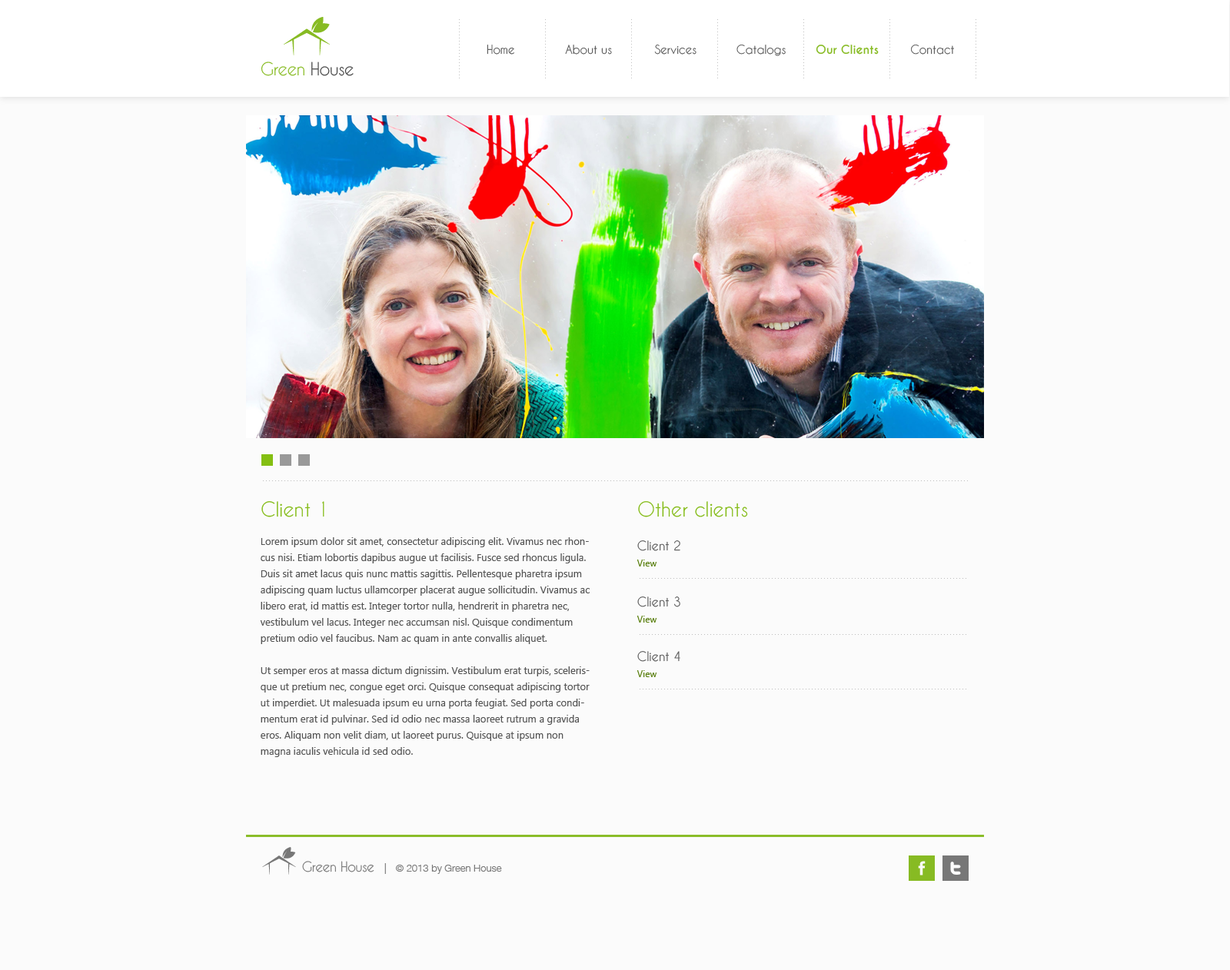
<style>
.page{position:relative;width:1230px;height:970px;background:#fbfbfb}
.page>*{position:absolute;margin:0}
.t1{font:11.5px "CaviarDreams";color:#555555}
.t2{font:11.5px "CaviarDreams-Bold";color:#87bb23}
.t3{font:16.9px "CaviarDreams";letter-spacing:-0.025em;color:#87bb23}
.t4{font:16.9px "CaviarDreams";letter-spacing:-0.025em;color:#444444}
.t5{font:19.2px "CaviarDreams";color:#83bb15}
.t6{font:10px/16.1px "SegoeUI";color:#555555}
.t7{font:12.3px/16.1px "CaviarDreams";color:#555555}
.t8{font:9.2px/16.1px "SegoeUI";color:#577d0a}
.t9{font:13.1px "CaviarDreams";letter-spacing:-0.025em;color:#777777}
.t10{font:10px "HelveticaNeueW02-45Light";color:#777777}
.t11{font:10.8px "HelveticaNeueW02-45Light";color:#777777}
</style>
<div class="page">
<p class="t1" style="left:486px;top:45px;width:468px;height:11px">Home         About us            Services       Catalogs   <span class="t2">Our Clients        </span>Contact</p>
<p class="t3" style="left:261px;top:61px;width:92px;height:15px">Green <span class="t4">House</span></p>
<p class="t5" style="left:261px;top:501px;width:63px;height:16px">Client 1</p>
<p class="t5" style="left:638px;top:501px;width:110px;height:16px">Other clients</p>
<p class="t6" style="left:260px;top:537px;width:329px;height:220px">Lorem ipsum dolor sit amet, consectetur adipiscing elit. Vivamus nec rhoncus nisi. Etiam lobortis dapibus augue ut facilisis. Fusce sed rhoncus ligula. Duis sit amet lacus quis nunc mattis sagittis. Pellentesque pharetra ipsum adipiscing quam luctus ullamcorper placerat augue sollicitudin. Vivamus ac libero erat, id mattis est. Integer tortor nulla, hendrerit in pharetra nec, vestibulum vel lacus. Integer nec accumsan nisl. Quisque condimentum pretium odio vel faucibus. Nam ac quam in ante convallis aliquet. <br><br>Ut semper eros at massa dictum dignissim. Vestibulum erat turpis, scelerisque ut pretium nec, congue eget orci. Quisque consequat adipiscing tortor ut imperdiet. Ut malesuada ipsum eu urna porta feugiat. Sed porta condimentum erat id pulvinar. Sed id odio nec massa laoreet rutrum a gravida eros. Aliquam non velit diam, ut laoreet purus. Quisque at ipsum non magna iaculis vehicula id sed odio.</p>
<p class="t7" style="left:636px;top:540px;width:44px;height:26px">Client 2<br><span class="t8">View</span></p>
<p class="t7" style="left:636px;top:596px;width:44px;height:26px">Client 3<br><span class="t8">View</span></p>
<p class="t7" style="left:636px;top:651px;width:44px;height:26px">Client 4<br><span class="t8">View</span></p>
<p class="t9" style="left:302px;top:861px;width:72px;height:11px">Green House</p>
<p class="t10" style="left:384px;top:863px;width:118px;height:11px"><span class="t11">|   </span>© 2013 by Green House</p>
</div>
